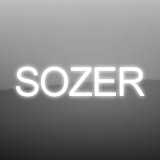
<style>
.page{position:relative;width:160px;height:160px}
.page>*{position:absolute;margin:0}
.t1{font:40px "ArialMT";letter-spacing:-0.04em;color:#ffffff}
</style>
<div class="page">
<p class="t1" style="left:16px;top:66px;width:129px;height:31px">SOZER</p>
</div>
